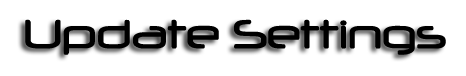
<style>
.page{position:relative;width:466px;height:76px;background:#ffffff}
.page>*{position:absolute;margin:0}
.t1{font:47.8px "Neuropol";color:#000000}
</style>
<div class="page">
<p class="t1" style="left:25px;top:19px;width:421px;height:36px">Update Settings</p>
</div>
